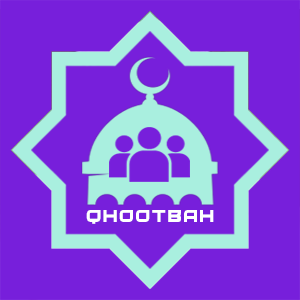
<style>
.page{position:relative;width:300px;height:300px;background:#771fdb}
.page>*{position:absolute;margin:0}
.t1{font:16.7px "UnitedKingdom";letter-spacing:0.1em;color:#ffffff}
</style>
<div class="page">
<p class="t1" style="left:86px;top:210px;width:128px;height:14px">qhootbah</p>
</div>
